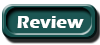
<style>
.page{position:relative;width:100px;height:45px;background:#ffffff}
.page>*{position:absolute;margin:0}
.t1{font:18px "ErasITC-Bold";color:#ffffff}
</style>
<div class="page">
<p class="t1" style="left:17px;top:16px;width:67px;height:12px">Review</p>
</div>
